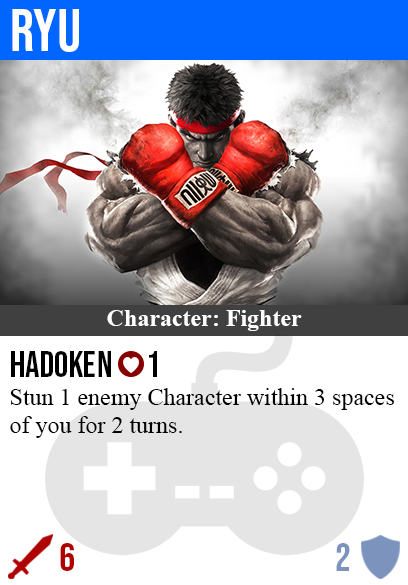
<style>
.page{position:relative;width:408px;height:585px;background:#ffffff}
.page>*{position:absolute;margin:0}
.t1{font:60px "BebasNeue-Regular";color:#ffffff}
.t2{font:24px "TimesNewRomanPS-BoldMT";color:#ffffff}
.t3{font:36px "BebasNeue-Regular";color:#000000}
.t4{font:24px "TimesNewRomanPSMT";color:#000000}
.t5{font:40px "BebasNeue-Regular";color:#af0202}
.t6{font:40px "BebasNeue-Regular";color:#7c94bd}
</style>
<div class="page">
<p class="t1" style="left:12px;top:9px;width:67px;height:43px">ryu</p>
<p class="t2" style="left:107px;top:310px;width:195px;height:21px">Character: Fighter</p>
<p class="t3" style="left:11px;top:351px;width:146px;height:26px">hadoken      1</p>
<p class="t4" style="left:10px;top:388px;width:384px;height:50px">Stun 1 enemy Character within 3 spaces<br>of you for 2 turns.</p>
<p class="t5" style="left:60px;top:543px;width:14px;height:28px">6</p>
<p class="t6" style="left:336px;top:543px;width:14px;height:28px">2</p>
</div>
